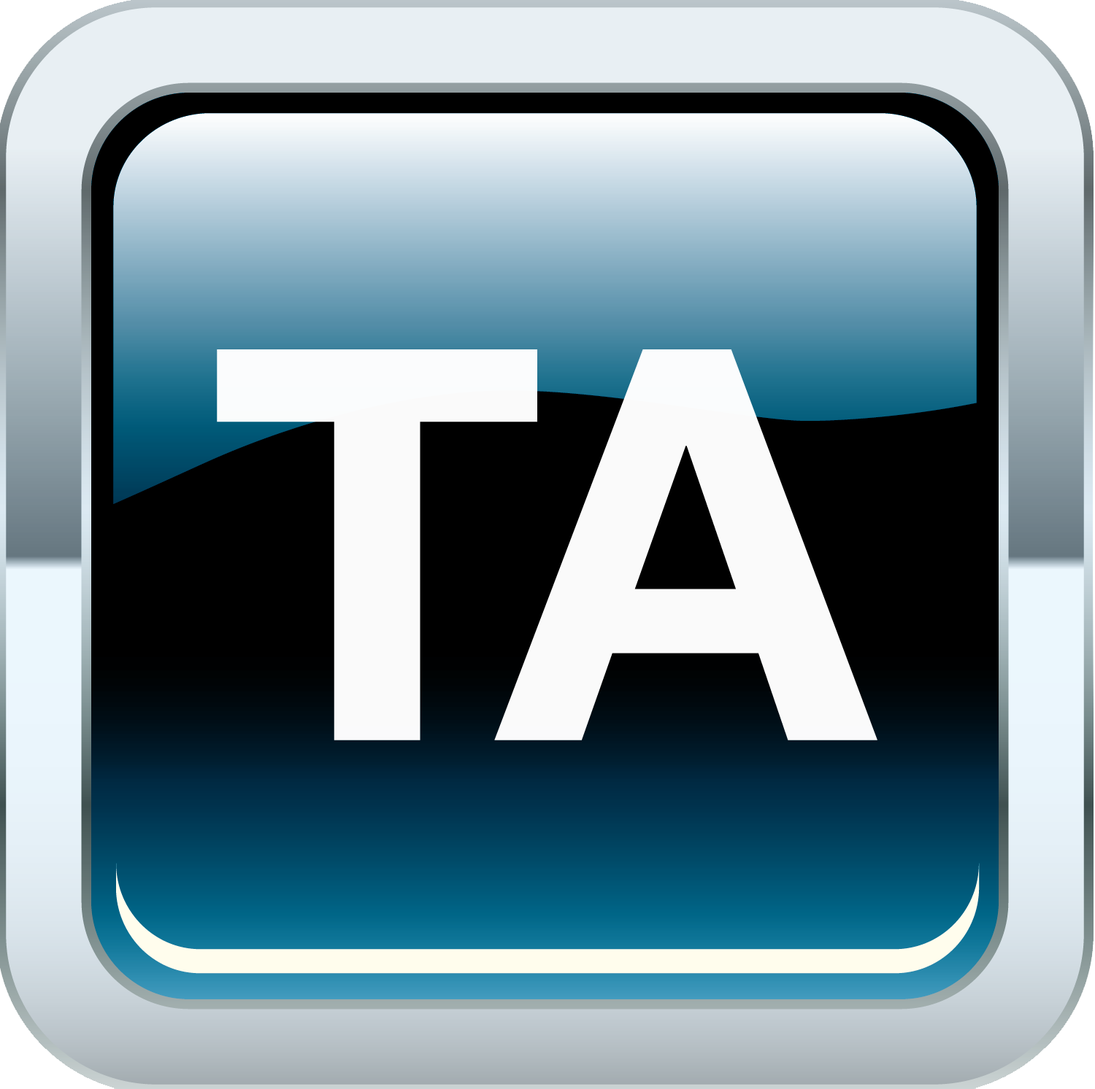
<style>
.page{position:relative;width:1095px;height:1089px}
.page>*{position:absolute;margin:0}
.t1{font:547.3px "HelveticaNeueLTStd-Bd";letter-spacing:-0.01em;color:#ffffff}
</style>
<div class="page">
<p class="t1" style="left:217px;top:350px;width:660px;height:391px">TA</p>
</div>
